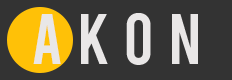
<style>
.page{position:relative;width:232px;height:80px;background:#333333}
.page>*{position:absolute;margin:0}
.t1{font:72px "Bebas-Regular";letter-spacing:0.2em;color:#e9e7e7}
</style>
<div class="page">
<p class="t1" style="left:33px;top:13px;width:165px;height:52px">AKON</p>
</div>
